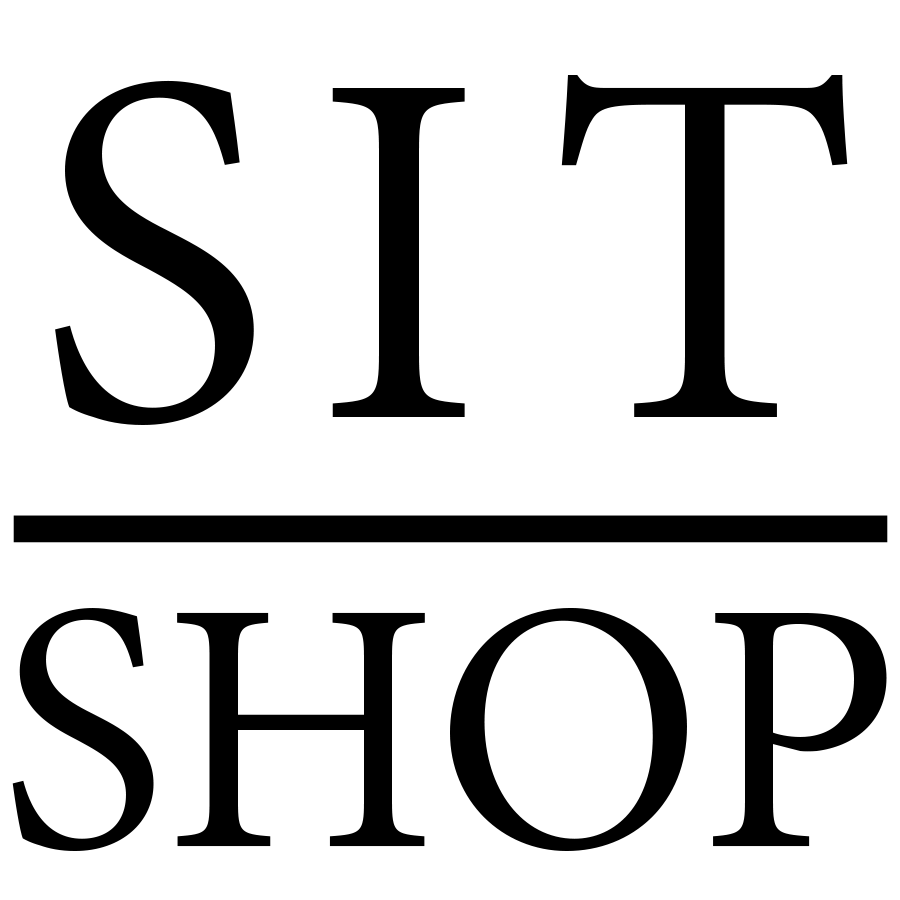
<style>
.page{position:relative;width:900px;height:900px;background:#ffffff}
.page>*{position:absolute;margin:0}
.t1{font:616.7px "AdobeThai-Regular";color:#000000}
.t2{font:437.5px "AdobeThai-Regular";color:#000000}
</style>
<div class="page">
<p class="t1" style="left:561px;top:75px;width:287px;height:342px">T</p>
<p class="t1" style="left:55px;top:80px;width:199px;height:345px">S</p>
<p class="t1" style="left:332px;top:88px;width:133px;height:329px">I</p>
<p class="t2" style="left:12px;top:608px;width:875px;height:243px">SHOP</p>
</div>
